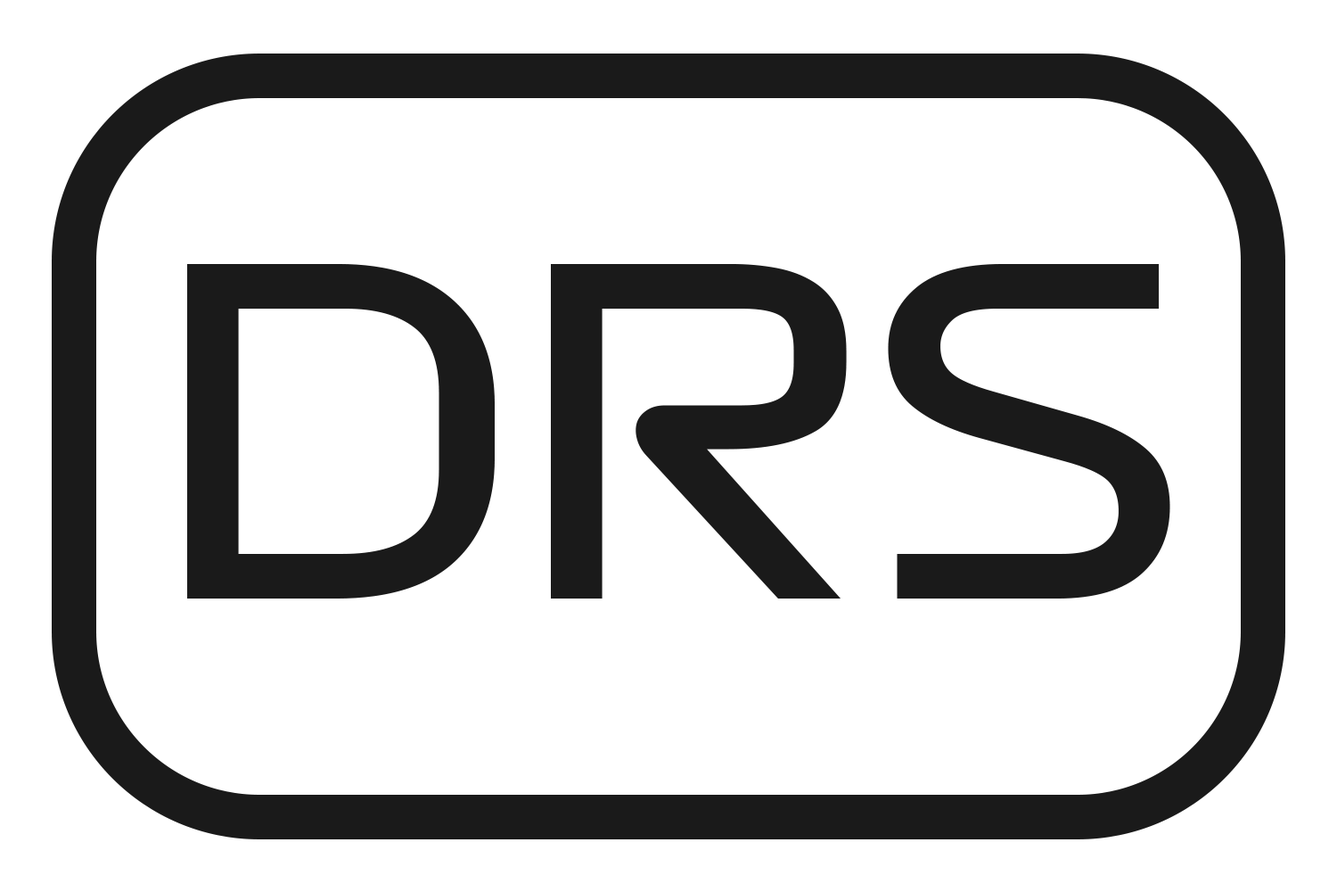
<style>
.page{position:relative;width:1337px;height:892px;background:#ffffff}
.page>*{position:absolute;margin:0}
.t1{font:445.8px "Formula1-Display-Regular";color:#1a1a1a}
</style>
<div class="page">
<p class="t1" style="left:187px;top:264px;width:984px;height:334px">DRS</p>
</div>
